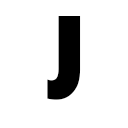
<style>
.page{position:relative;width:128px;height:128px;background:#ffffff}
.page>*{position:absolute;margin:0}
.t1{font:123px "PumpDemiBoldLetPlain";color:#000000}
</style>
<div class="page">
<p class="t1" style="left:47px;top:16px;width:34px;height:84px">J</p>
</div>
